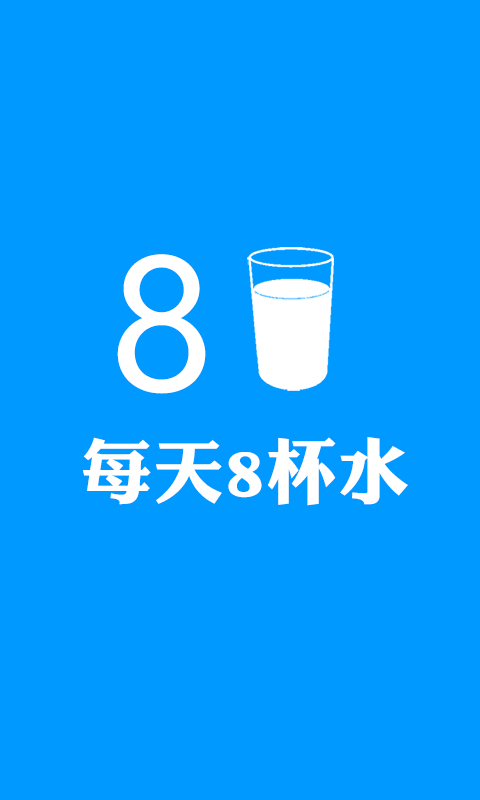
<style>
.page{position:relative;width:480px;height:800px;background:#0099ff}
.page>*{position:absolute;margin:0}
.t1{font:192px "SegoeUISymbol";color:#ffffff}
.t2{font:72px "DFPLiJinHeiW8";color:#ffffff}
</style>
<div class="page">
<p class="t1" style="left:117px;top:254px;width:89px;height:140px">8</p>
<p class="t2" style="left:83px;top:437px;width:325px;height:69px">每天8杯水</p>
</div>
